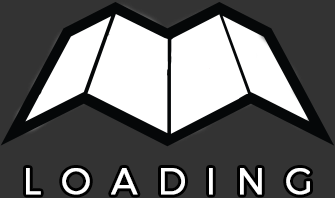
<style>
.page{position:relative;width:335px;height:198px;background:#333333}
.page>*{position:absolute;margin:0}
.t1{font:36px "Montserrat-Light";letter-spacing:0.54em;color:#ffffff;text-transform:uppercase;font-weight:bold}
</style>
<div class="page">
<p class="t1" style="left:26px;top:168px;width:284px;height:27px">LOADING</p>
</div>
